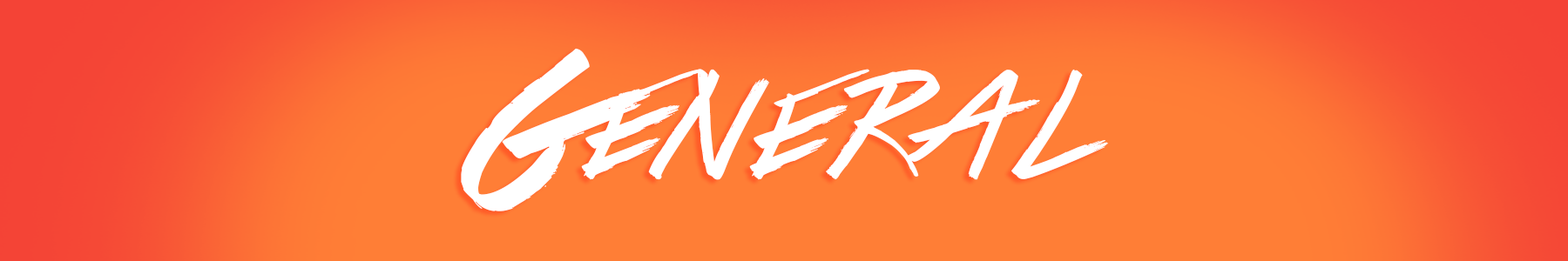
<style>
.page{position:relative;width:1568px;height:261px;background:#ff7e36}
.page>*{position:absolute;margin:0}
.t1{font:156.8px "ColorsOfAutumn";color:#ffffff}
</style>
<div class="page">
<p class="t1" style="left:461px;top:48px;width:648px;height:164px">General</p>
</div>
